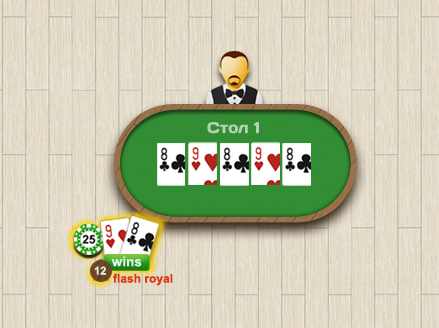
<style>
.page{position:relative;width:439px;height:328px}
.page>*{position:absolute;margin:0}
.t1{font:15.4px "Days";color:#b1d4b1}
.t2{font:13.6px "Arial-BoldMT";color:#e5f4e9}
.t3{font:11.1px "Arial-BoldMT";color:#e4f2e7}
.t4{font:12px "Arial-BoldMT";color:#da3a0a}
</style>
<div class="page">
<p class="t1" style="left:207px;top:122px;width:52px;height:12px">Стол 1</p>
<p class="t2" style="left:111px;top:256px;width:31px;height:11px">wins</p>
<p class="t3" style="left:94px;top:266px;width:12px;height:9px">12</p>
<p class="t4" style="left:113px;top:273px;width:60px;height:13px">flash royal</p>
</div>
